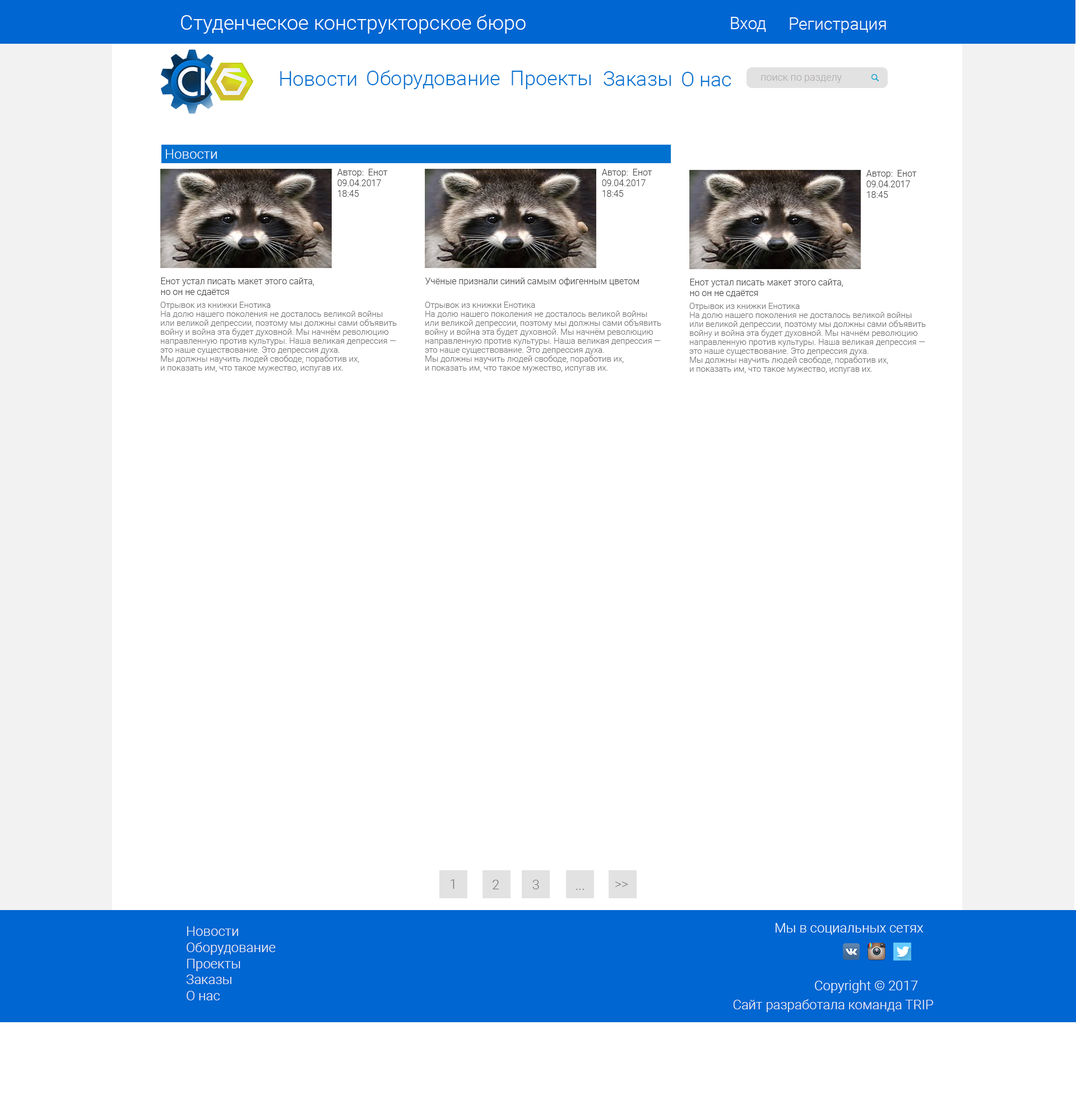
<style>
.page{position:relative;width:1076px;height:1108px;background:#ffffff}
.page>*{position:absolute;margin:0}
.t1{font:20.2px "Roboto-Light";color:#f8fdff}
.t2{font:16.8px "Roboto-Light";color:#f8fdff}
.t3{font:20.2px "Roboto-Light";color:#0171d0}
.t4{font:10.1px "Roboto-Light";color:#b3adad}
.t5{font:13.5px "Roboto-Light";color:#ffffff}
.t6{font:9px "Roboto-Light";color:#464646}
.t7{font:8.4px/9px "Roboto-Light";color:#747474}
.t8{font:13.5px "Roboto-Light";color:#747474}
.t9{font:13.5px "Roboto-Light";color:#f8f3f3}
.t10{font:13.5px "Roboto-Light";color:#f8fdff}
</style>
<div class="page">
<p class="t1" style="left:181px;top:15px;width:345px;height:19px">Студенческое конструкторское бюро</p>
<p class="t2" style="left:731px;top:17px;width:35px;height:15px">Вход</p>
<p class="t2" style="left:790px;top:17px;width:96px;height:16px">Регистрация</p>
<p class="t3" style="left:280px;top:71px;width:77px;height:15px">Новости</p>
<p class="t3" style="left:367px;top:70px;width:133px;height:19px">Оборудование</p>
<p class="t3" style="left:512px;top:71px;width:79px;height:18px">Проекты</p>
<p class="t3" style="left:604px;top:71px;width:67px;height:15px">Заказы</p>
<p class="t3" style="left:682px;top:72px;width:50px;height:14px">О нас</p>
<p class="t4" style="left:761px;top:75px;width:81px;height:8px">поиск по разделу</p>
<p class="t5" style="left:166px;top:149px;width:51px;height:10px">Новости</p>
<p class="t6" style="left:337px;top:169px;width:51px;height:28px">Автор:  Енот<br>09.04.2017<br>18:45</p>
<p class="t6" style="left:602px;top:169px;width:51px;height:28px">Автор:  Енот<br>09.04.2017<br>18:45</p>
<p class="t6" style="left:866px;top:170px;width:51px;height:28px">Автор:  Енот<br>09.04.2017<br>18:45</p>
<p class="t6" style="left:161px;top:278px;width:153px;height:18px">Енот устал писать макет этого сайта, <br>но он не сдаётся</p>
<p class="t6" style="left:425px;top:278px;width:214px;height:8px">Учёные признали синий самым офигенным цветом</p>
<p class="t6" style="left:690px;top:279px;width:153px;height:18px">Енот устал писать макет этого сайта, <br>но он не сдаётся</p>
<p class="t7" style="left:160px;top:302px;width:237px;height:70px">Отрывок из книжки Енотика<br>На долю нашего поколения не досталось великой войны <br>или великой депрессии, поэтому мы должны сами объявить<br>войну и война эта будет духовной. Мы начнём революцию<br>направленную против культуры. Наша великая депрессия — <br>это наше существование. Это депрессия духа.<br>Мы должны научить людей свободе, поработив их,<br>и показать им, что такое мужество, испугав их.</p>
<p class="t7" style="left:425px;top:302px;width:237px;height:70px">Отрывок из книжки Енотика<br>На долю нашего поколения не досталось великой войны <br>или великой депрессии, поэтому мы должны сами объявить<br>войну и война эта будет духовной. Мы начнём революцию<br>направленную против культуры. Наша великая депрессия — <br>это наше существование. Это депрессия духа.<br>Мы должны научить людей свободе, поработив их,<br>и показать им, что такое мужество, испугав их.</p>
<p class="t7" style="left:690px;top:303px;width:236px;height:70px">Отрывок из книжки Енотика<br>На долю нашего поколения не досталось великой войны <br>или великой депрессии, поэтому мы должны сами объявить<br>войну и война эта будет духовной. Мы начнём революцию<br>направленную против культуры. Наша великая депрессия — <br>это наше существование. Это депрессия духа.<br>Мы должны научить людей свободе, поработив их,<br>и показать им, что такое мужество, испугав их.</p>
<p class="t8" style="left:451px;top:879px;width:4px;height:10px">1</p>
<p class="t8" style="left:493px;top:880px;width:7px;height:9px">2</p>
<p class="t8" style="left:533px;top:880px;width:6px;height:9px">3</p>
<p class="t8" style="left:615px;top:881px;width:13px;height:6px">&gt;&gt;</p>
<p class="t8" style="left:576px;top:889px;width:8px;height:1px">...</p>
<p class="t9" style="left:187px;top:926px;width:89px;height:74px">Новости<br>Оборудование<br>Проекты<br>Заказы<br>О нас</p>
<p class="t10" style="left:776px;top:923px;width:148px;height:12px">Мы в социальных сетях</p>
<p class="t10" style="left:815px;top:980px;width:103px;height:13px">Copyright © 2017</p>
<p class="t9" style="left:733px;top:999px;width:200px;height:13px">Сайт разработала команда TRIP</p>
</div>
